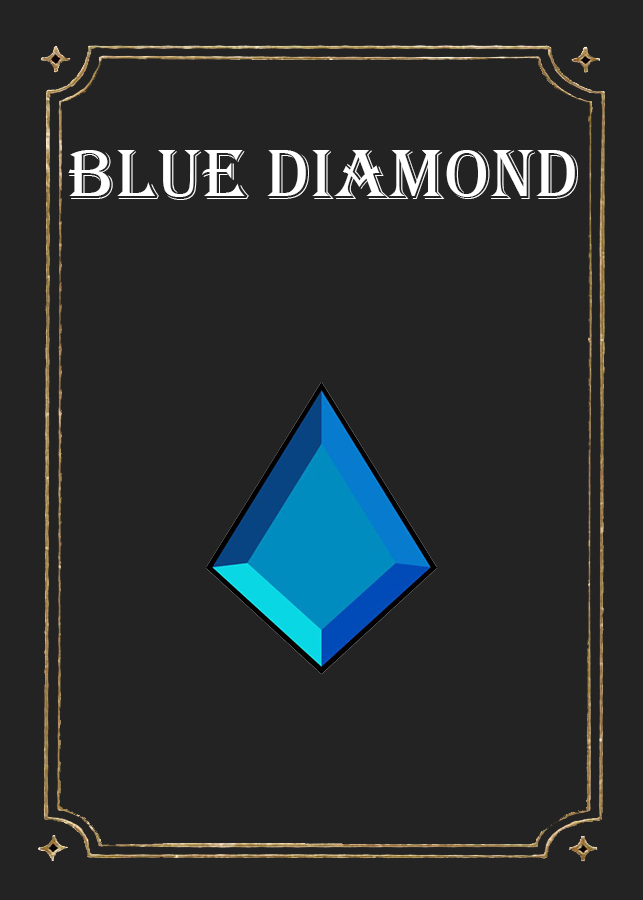
<style>
.page{position:relative;width:643px;height:900px;background:#232323}
.page>*{position:absolute;margin:0}
.t1{font:74.3px "Algerian";color:#ffffff}
</style>
<div class="page">
<p class="t1" style="left:68px;top:150px;width:510px;height:50px">blue diamond</p>
</div>
